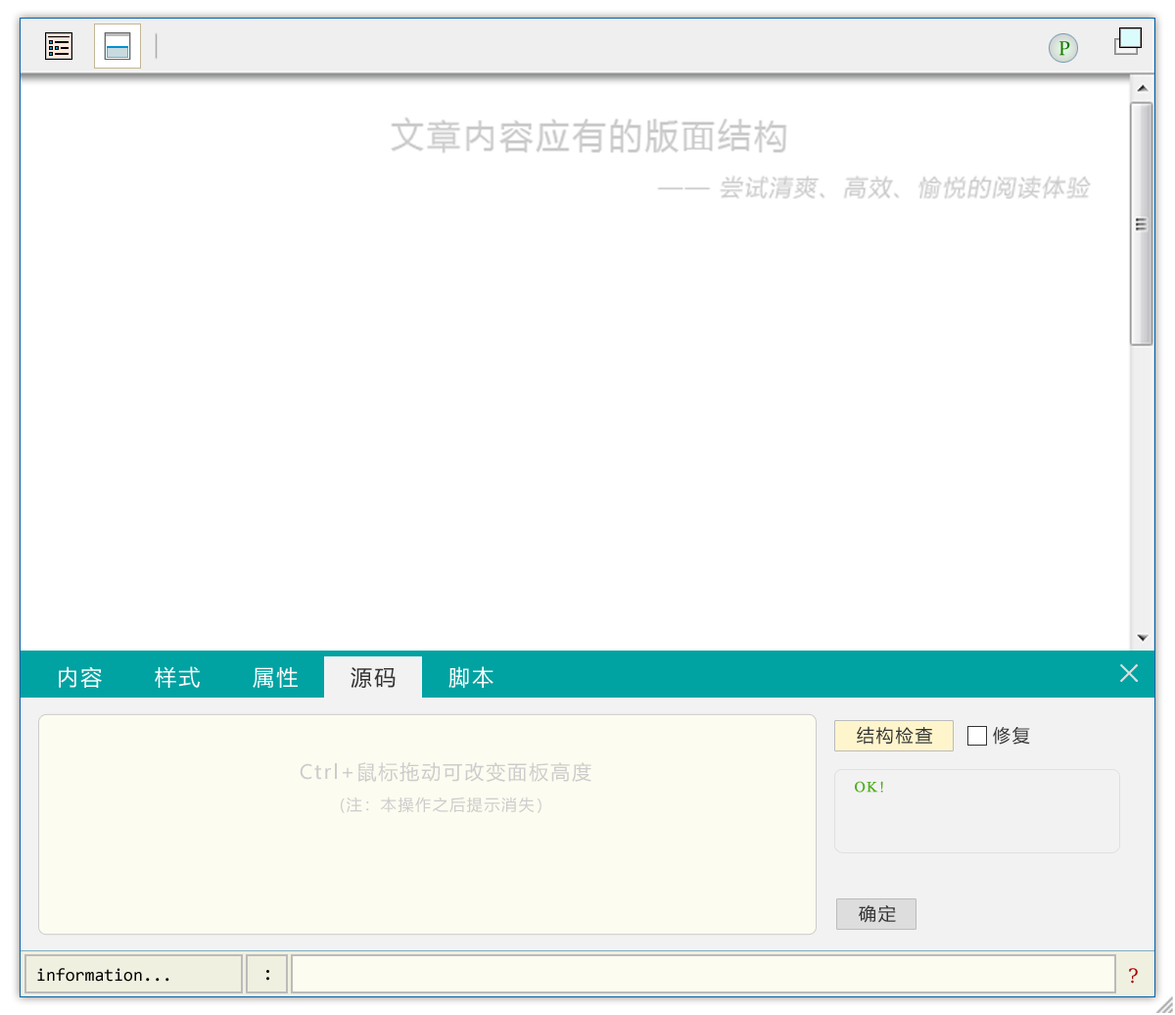
<style>
.page{position:relative;width:1175px;height:1015px;background:#ffffff}
.page>*{position:absolute;margin:0}
.t1{font:19.6px "Constantia";color:#1b7802}
.t2{font:21.5px "MicrosoftYaHei";letter-spacing:0.1em;color:#ffffff}
.t3{font:27.4px "NSimSun";letter-spacing:0.1em;color:#dddddd;font-weight:bold}
.t4{font:21.5px "MicrosoftYaHei";letter-spacing:0.1em;color:#333333}
.t5{font:17.6px "MicrosoftYaHei";letter-spacing:0.1em;color:#333333}
.t6{font:19.6px "MicrosoftYaHei";letter-spacing:0.1em;color:#cccccc}
.t7{font:15.7px "MicrosoftYaHei";letter-spacing:0.1em;color:#cccccc}
.t8{font:14.7px "TimesNewRomanPSMT";letter-spacing:0.1em;color:#52ae23;font-weight:bold}
.t9{font:17.6px "Consolas";color:#000000}
.t10{font:19.6px "Consolas";color:#000000}
.t11{font:19.6px "DejaVuSerif";color:#aa0000}
</style>
<div class="page">
<p class="t1" style="left:1060px;top:41px;width:10px;height:15px">P</p>
<p class="t2" style="left:59px;top:666px;width:43px;height:22px">内容</p>
<p class="t2" style="left:155px;top:666px;width:45px;height:22px">样式</p>
<p class="t2" style="left:449px;top:666px;width:45px;height:22px">脚本</p>
<p class="t3" style="left:1120px;top:664px;width:19px;height:18px">×</p>
<p class="t2" style="left:253px;top:667px;width:45px;height:21px">属性</p>
<p class="t4" style="left:351px;top:667px;width:45px;height:21px">源码</p>
<p class="t5" style="left:857px;top:726px;width:76px;height:18px">结构检查</p>
<p class="t5" style="left:993px;top:727px;width:37px;height:17px">修复</p>
<p class="t6" style="left:300px;top:762px;width:292px;height:51px;text-align:center">Ctrl+鼠标拖动可改变面板高度<br><span class="t7">(注：本操作之后提示消失）</span></p>
<p class="t8" style="left:855px;top:781px;width:28px;height:11px">OK!</p>
<p class="t5" style="left:859px;top:905px;width:37px;height:18px">确定</p>
<p class="t9" style="left:37px;top:968px;width:132px;height:13px">information...</p>
<p class="t10" style="left:266px;top:970px;width:3px;height:10px">:</p>
<p class="t11" style="left:1129px;top:968px;width:9px;height:15px">?</p>
</div>
